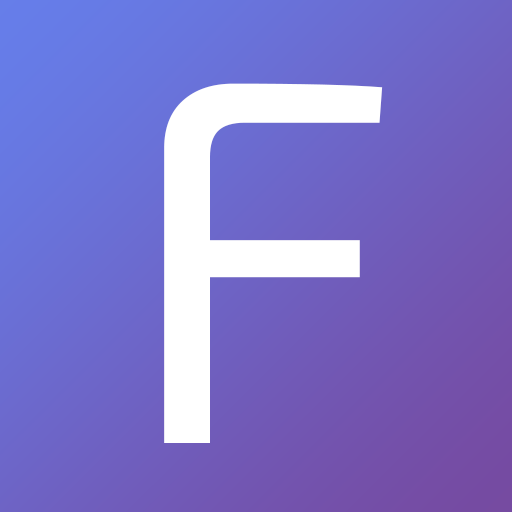
<style>
.page{position:relative;width:512px;height:512px}
.page>*{position:absolute;margin:0}
.t1{font:520px "Exo2-Regular";letter-spacing:0.04em;color:#ffffff;text-transform:uppercase}
</style>
<div class="page">
<p class="t1" style="left:164px;top:83px;width:219px;height:360px">F</p>
</div>
